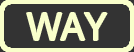
<style>
.page{position:relative;width:134px;height:52px;background:#333333}
.page>*{position:absolute;margin:0}
.t1{font:37.5px "NanumSquareOTF_acB";letter-spacing:-0.05em;color:#f9ffcb}
</style>
<div class="page">
<p class="t1" style="left:27px;top:12px;width:80px;height:28px">WAY</p>
</div>
